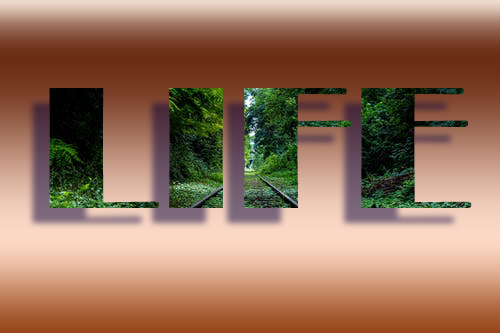
<style>
.page{position:relative;width:500px;height:333px}
.page>*{position:absolute;margin:0}
.t1{font:180px "Broadway"}
</style>
<div class="page">
<p class="t1" style="left:49px;top:88px;width:423px;height:120px">LIFE</p>
</div>
